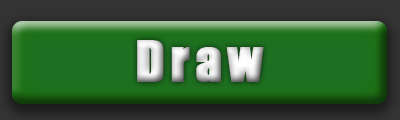
<style>
.page{position:relative;width:400px;height:120px}
.page>*{position:absolute;margin:0}
.t1{font:52px "Impact";letter-spacing:0.09em;font-weight:bold}
</style>
<div class="page">
<p class="t1" style="left:137px;top:40px;width:127px;height:42px">Draw</p>
</div>
